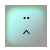
<style>
.page{position:relative;width:50px;height:50px;background:#ffffff}
.page>*{position:absolute;margin:0}
.t1{font:18px "Tahoma";color:#000000}
.t2{font:12px "Tahoma";color:#000000}
</style>
<div class="page">
<p class="t1" style="left:23px;top:17px;width:7px;height:2px">¨</p>
<p class="t2" style="left:22px;top:30px;width:8px;height:4px">^</p>
</div>
